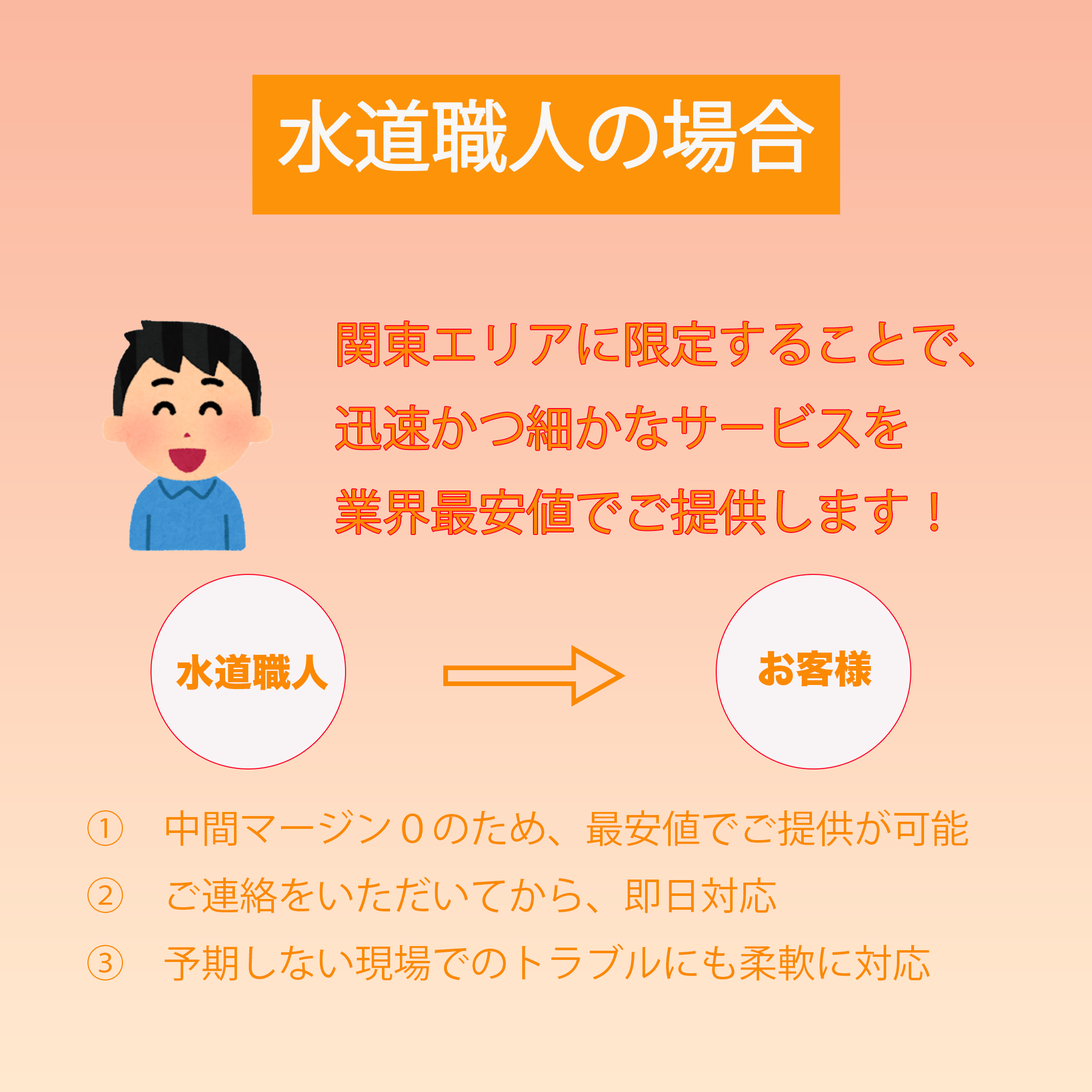
<style>
.page{position:relative;width:1092px;height:1092px}
.page>*{position:absolute;margin:0}
.t1{font:76.8px "KozGoPr6N-Regular";color:#f9f7f5}
.t2{font:48px "KozGoPr6N-Regular";color:#fb8902}
.t3{font:38.4px "HiraKakuStd-W8";color:#fb8902}
.t4{font:202.1px "HiraKakuStd-W8";color:#fb8902}
.t5{font:38.4px "KozGoPr6N-Regular";color:#fb8902}
</style>
<div class="page">
<p class="t1" style="left:279px;top:100px;width:534px;height:72px">水道職人の場合</p>
<p class="t2" style="left:336px;top:321px;width:638px;height:213px">関東エリアに限定することで、<br>迅速かつ細かなサービスを<br>業界最安値でご提供します！</p>
<p class="t3" style="left:176px;top:654px;width:153px;height:37px">水道職人</p>
<p class="t4" style="left:443px;top:645px;width:183px;height:62px">⇨</p>
<p class="t3" style="left:759px;top:650px;width:113px;height:37px">お客様</p>
<p class="t5" style="left:87px;top:809px;width:881px;height:172px">①　中間マージン０のため、最安値でご提供が可能<br>②　ご連絡をいただいてから、即日対応<br>③　予期しない現場でのトラブルにも柔軟に対応</p>
</div>
